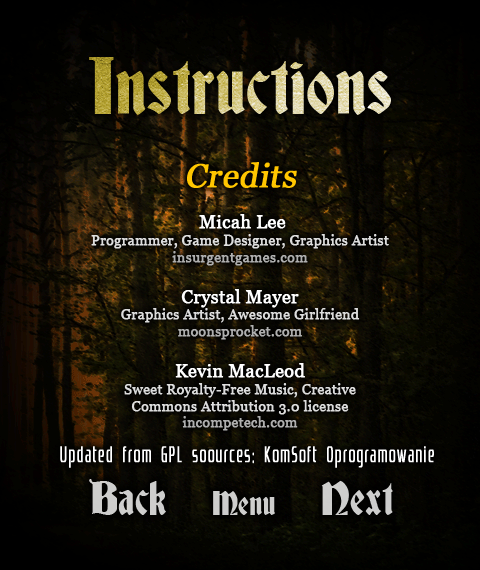
<style>
.page{position:relative;width:480px;height:570px}
.page>*{position:absolute;margin:0}
.t1{font:73px "Deutsch-Gothic"}
.t2{font:14px "Georgia";color:#dddddd;font-weight:bold}
.t3{font:33px "Georgia";color:#ffc600;font-weight:bold;font-style:italic}
.t4{font:18px "Georgia";color:#ffffff;font-weight:bold}
.t5{font:14px "Georgia";color:#dedede;font-weight:bold}
.t6{font:14px "Georgia";color:#afafaf;font-weight:bold}
.t7{font:24px "Playerpl";letter-spacing:0.125em;color:#ffffff;font-weight:bold;scale:0.54 1}
.t8{font:43px "Deutsch-Gothic";color:#cececc}
.t9{font:31px "Deutsch-Gothic";color:#cececc}
</style>
<div class="page">
<p class="t1" style="left:89px;top:57px;width:302px;height:58px">Instructions</p>
<p class="t2" style="left:91px;top:162px;width:298px;height:269px;text-align:center"><span class="t3">Credits<br><br></span><span class="t4"> Micah Lee<br></span><span class="t5">Programmer, Game Designer, Graphics Artist<br></span><span class="t6">insurgentgames.com<br><br></span><span class="t4">Crystal Mayer<br></span>Graphics Artist, Awesome Girlfriend<br><span class="t6">moonsprocket.com<br><br></span><span class="t4">Kevin MacLeod<br></span>Sweet Royalty-Free Music, Creative Commons Attribution 3.0 license<br><span class="t6">incompetech.com</span></p>
<p class="t7" style="left:60px;top:446px;width:374px;height:22px">Updated from GPL soources: KomSoft Oprogramowanie</p>
<p class="t8" style="left:89px;top:479px;width:304px;height:36px">Back  <span class="t9">Menu</span>  Next</p>
</div>
